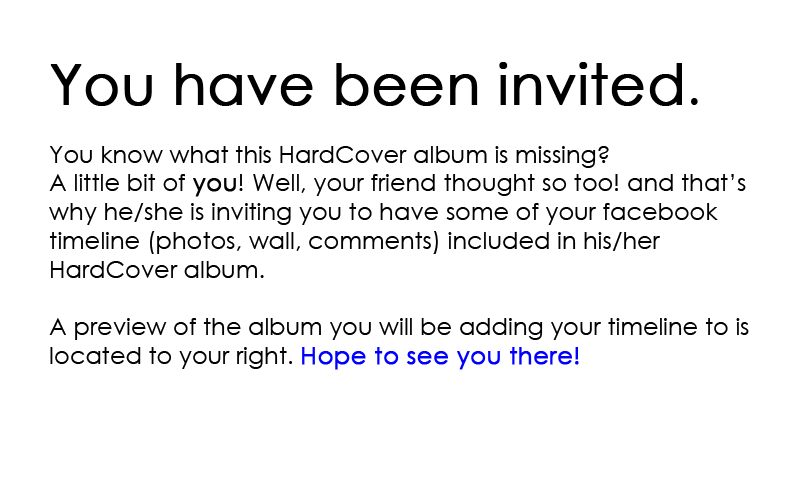
<style>
.page{position:relative;width:800px;height:478px;background:#ffffff}
.page>*{position:absolute;margin:0}
.t1{font:55px "CenturyGothic";color:#000000;font-weight:bold}
.t2{font:55px "CenturyGothic";color:#000000}
.t3{font:24px "CenturyGothic";color:#000000}
.t4{font:24px "CenturyGothic";color:#000000;font-weight:bold}
.t5{font:24px "CenturyGothic";color:#0000ff;font-weight:bold}
</style>
<div class="page">
<p class="t1" style="left:50px;top:62px;width:648px;height:44px">You have been invited<span class="t2">.</span></p>
<p class="t3" style="left:49px;top:146px;width:700px;height:224px">You know what this HardCover album is missing? <br>A little bit of <span class="t4">you</span>! Well, your friend thought so too! and that’s <br>why he/she is inviting you to have some of your facebook <br>timeline (photos, wall, comments) included in his/her <br>HardCover album. <br><br>A preview of the album you will be adding your timeline to is <br>located to your right. <span class="t5">Hope to see you there!</span></p>
</div>
